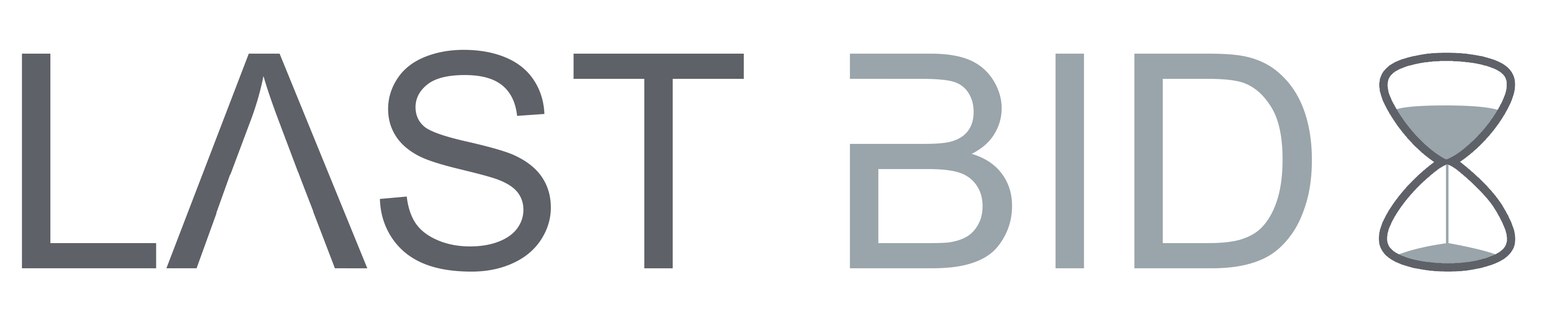
<style>
.page{position:relative;width:1568px;height:330px;background:#ffffff}
.page>*{position:absolute;margin:0}
.t1{font:299.9px "ArialMT";color:#5e6167;text-transform:uppercase}
.t2{font:299.9px "ArialMT";color:#9aa5ab;text-transform:uppercase}
</style>
<div class="page">
<p class="t1" style="left:22px;top:50px;width:1290px;height:222px">Last <span class="t2">Bid</span></p>
</div>
